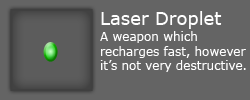
<style>
.page{position:relative;width:250px;height:100px;background:#646464}
.page>*{position:absolute;margin:0}
.t1{font:18px "Verdana";color:#ffffff}
.t2{font:12px "Verdana";color:#ffffff}
</style>
<div class="page">
<p class="t1" style="left:101px;top:11px;width:121px;height:18px">Laser Droplet</p>
<p class="t2" style="left:100px;top:31px;width:146px;height:41px">A weapon which recharges fast, however it’s not very destructive.</p>
</div>
